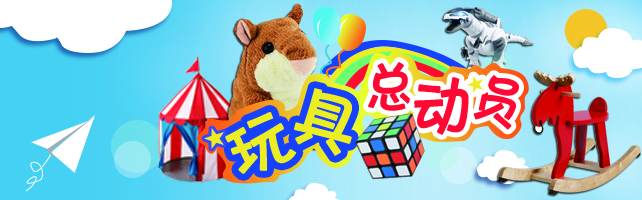
<style>
.page{position:relative;width:642px;height:200px}
.page>*{position:absolute;margin:0}
.t1{font:55.3px "FZKATJW--GB1-0";letter-spacing:0.1em;color:#ff0834;font-weight:bold}
.t2{font:66px "FZKATJW--GB1-0";letter-spacing:0.1em;color:#ff0834;font-weight:bold}
.t3{font:57.7px "FZKATJW--GB1-0";letter-spacing:0.1em;color:#ff0834;font-weight:bold}
.t4{font:67.4px "FZKATJW--GB1-0";letter-spacing:0.1em;color:#ecee23;font-weight:bold}
.t5{font:67px "FZKATJW--GB1-0";letter-spacing:0.1em;color:#ecee23;font-weight:bold}
</style>
<div class="page">
<p class="t1" style="left:368px;top:62px;width:43px;height:49px">总</p>
<p class="t2" style="left:414px;top:77px;width:55px;height:58px">动</p>
<p class="t3" style="left:473px;top:75px;width:46px;height:55px;rotate:18deg">员</p>
<p class="t4" style="left:294px;top:88px;width:58px;height:68px;rotate:19deg">具</p>
<p class="t5" style="left:225px;top:112px;width:72px;height:62px;rotate:-24deg">玩</p>
</div>
